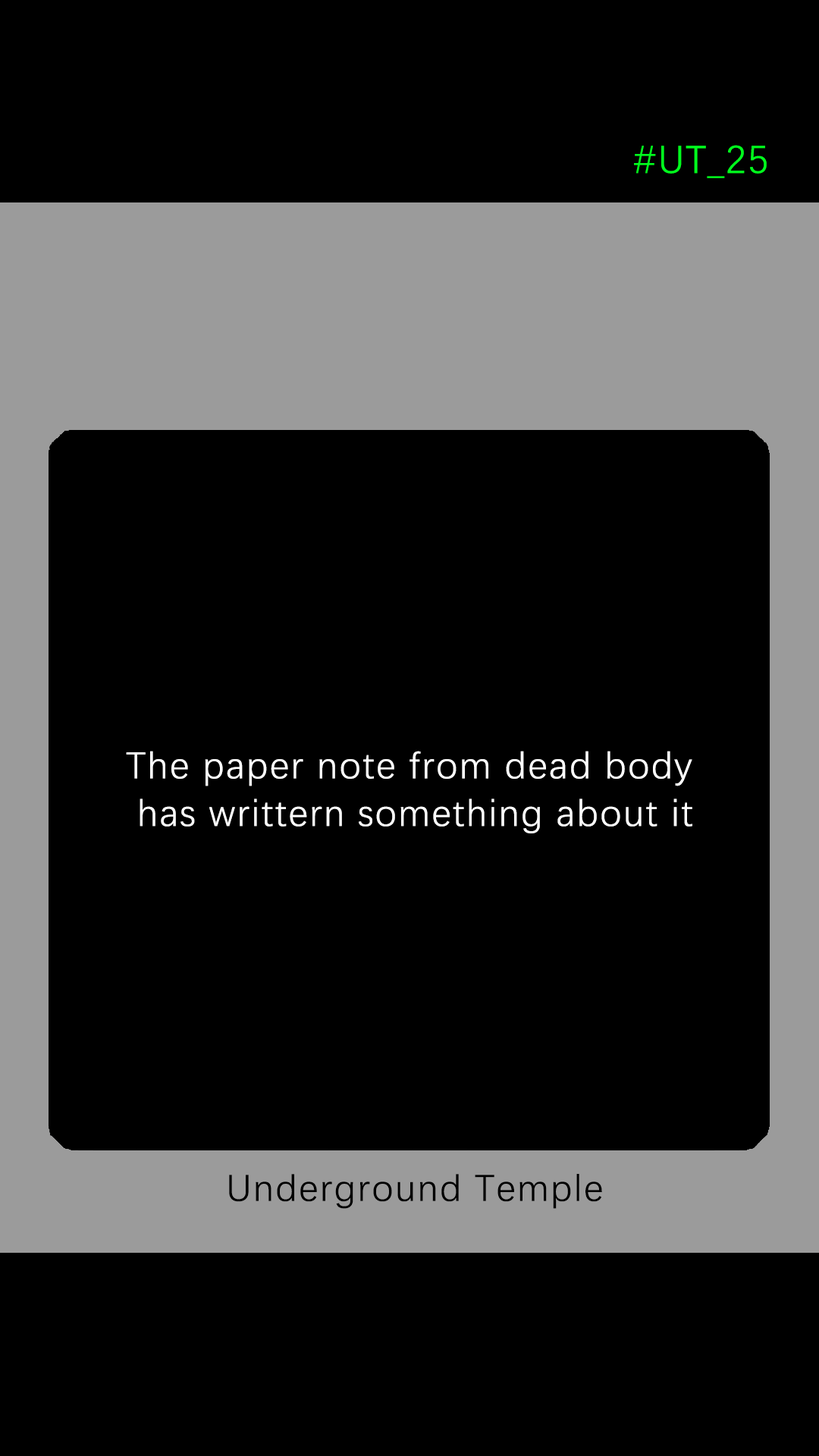
<style>
.page{position:relative;width:819px;height:1456px;background:#000000}
.page>*{position:absolute;margin:0}
.t1{font:39.2px "DengXian-Regular";letter-spacing:0.04em;color:#00ff1e}
.t2{font:37.9px/47.6px "DengXian-Regular";letter-spacing:0.04em;color:#ffffff}
.t3{font:37.9px "DengXian-Regular";letter-spacing:0.04em;color:#000000}
</style>
<div class="page">
<p class="t1" style="left:634px;top:145px;width:133px;height:33px">#UT_25</p>
<p class="t2" style="left:126px;top:751px;width:566px;height:82px;text-align:center">The paper note from dead body<br> has writtern something about it</p>
<p class="t3" style="left:229px;top:1174px;width:373px;height:35px">Underground Temple</p>
</div>
